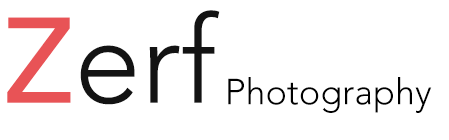
<style>
.page{position:relative;width:449px;height:140px;background:#ffffff}
.page>*{position:absolute;margin:0}
.t1{font:120px "Avenir-Light";color:#131313}
.t2{font:120px "AvenirNext-Medium";color:#e85356}
.t3{font:36px "Avenir-Light";color:#000000}
</style>
<div class="page">
<p class="t1" style="left:7px;top:10px;width:213px;height:95px"><span class="t2">Z</span>erf</p>
<p class="t3" style="left:228px;top:77px;width:204px;height:36px">Photography</p>
</div>
